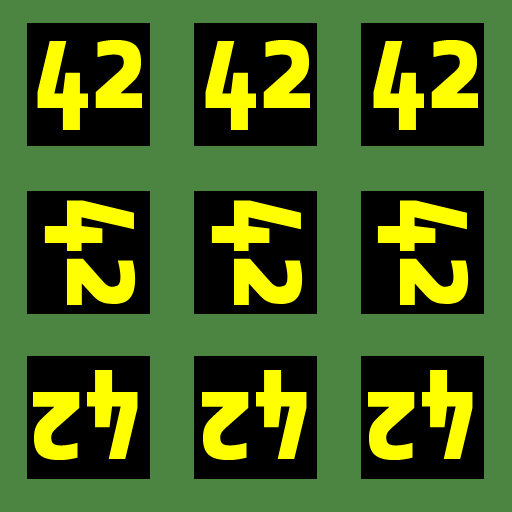
<style>
.page{position:relative;width:512px;height:512px;background:#4c8541}
.page>*{position:absolute;margin:0}
.t1{font:130px "Share-BoldOSF";color:#ffff00}
</style>
<div class="page">
<p class="t1" style="left:37px;top:39px;width:105px;height:92px">42</p>
<p class="t1" style="left:205px;top:39px;width:105px;height:92px">42</p>
<p class="t1" style="left:373px;top:39px;width:105px;height:92px">42</p>
<p class="t1" style="left:44px;top:200px;width:92px;height:105px;rotate:90deg">42</p>
<p class="t1" style="left:211px;top:200px;width:92px;height:105px;rotate:90deg">42</p>
<p class="t1" style="left:377px;top:200px;width:92px;height:105px;rotate:90deg">42</p>
<p class="t1" style="left:33px;top:369px;width:105px;height:92px;rotate:-180deg">42</p>
<p class="t1" style="left:202px;top:369px;width:105px;height:92px;rotate:-180deg">42</p>
<p class="t1" style="left:368px;top:369px;width:105px;height:92px;rotate:-180deg">42</p>
</div>
